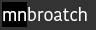
<style>
.page{position:relative;width:96px;height:30px;background:#333333}
.page>*{position:absolute;margin:0}
.t1{font:17.4px "KohinoorDevanagari-Regular";color:#ffffff}
</style>
<div class="page">
<p class="t1" style="left:3px;top:7px;width:84px;height:14px">mnbroatch</p>
</div>
